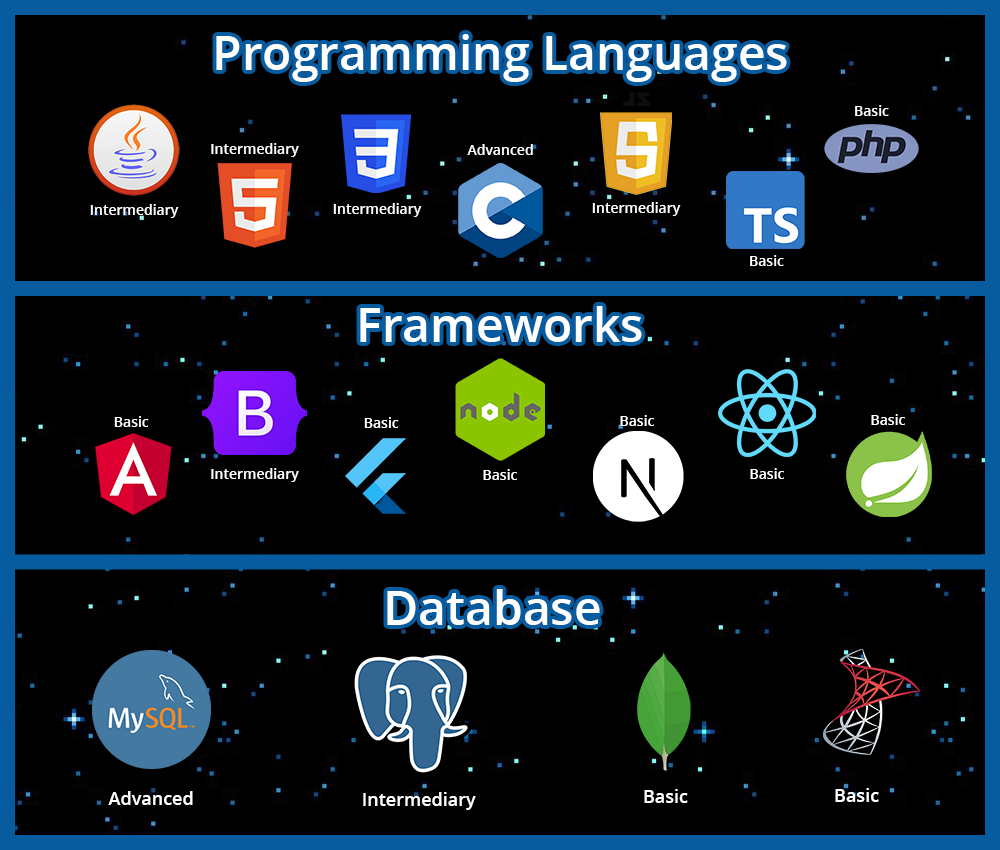
<style>
.page{position:relative;width:1000px;height:850px;background:#000000}
.page>*{position:absolute;margin:0}
.t1{font:48px "OpenSans-Semibold";color:#ffffff}
.t2{font:14px "OpenSans-Semibold";color:#ffffff}
.t3{font:18px "OpenSans-Semibold";color:#ffffff}
</style>
<div class="page">
<p class="t1" style="left:216px;top:34px;width:571px;height:48px">Programming Languages</p>
<p class="t2" style="left:855px;top:105px;width:34px;height:11px">Basic</p>
<p class="t2" style="left:211px;top:143px;width:88px;height:14px">Intermediary</p>
<p class="t2" style="left:467px;top:144px;width:66px;height:11px">Advanced</p>
<p class="t2" style="left:90px;top:204px;width:89px;height:14px">Intermediary</p>
<p class="t2" style="left:333px;top:203px;width:89px;height:14px">Intermediary</p>
<p class="t2" style="left:592px;top:202px;width:89px;height:14px">Intermediary</p>
<p class="t2" style="left:750px;top:255px;width:34px;height:11px">Basic</p>
<p class="t1" style="left:360px;top:306px;width:282px;height:36px">Frameworks</p>
<p class="t2" style="left:871px;top:414px;width:34px;height:11px">Basic</p>
<p class="t2" style="left:114px;top:416px;width:35px;height:11px">Basic</p>
<p class="t2" style="left:364px;top:417px;width:35px;height:11px">Basic</p>
<p class="t2" style="left:620px;top:415px;width:34px;height:11px">Basic</p>
<p class="t2" style="left:211px;top:468px;width:88px;height:14px">Intermediary</p>
<p class="t2" style="left:483px;top:469px;width:34px;height:11px">Basic</p>
<p class="t2" style="left:750px;top:468px;width:34px;height:11px">Basic</p>
<p class="t1" style="left:387px;top:589px;width:213px;height:36px">Database</p>
<p class="t3" style="left:108px;top:791px;width:85px;height:14px">Advanced</p>
<p class="t3" style="left:363px;top:792px;width:113px;height:18px">Intermediary</p>
<p class="t3" style="left:644px;top:789px;width:44px;height:14px">Basic</p>
<p class="t3" style="left:835px;top:788px;width:44px;height:14px">Basic</p>
</div>
